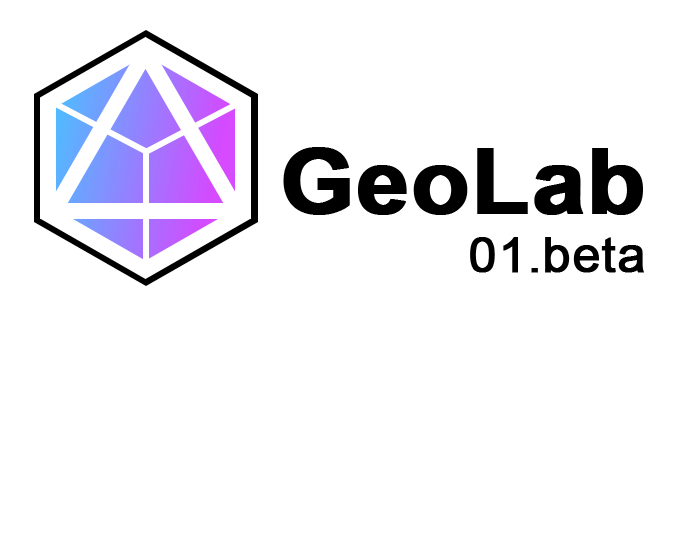
<style>
.page{position:relative;width:680px;height:558px;background:#ffffff}
.page>*{position:absolute;margin:0}
.t1{font:90px "Arial-BoldMT";color:#000000;font-weight:bold;scale:1.05 1}
.t2{font:48px "ArialMT";color:#000000;font-weight:bold;scale:1.05 1}
</style>
<div class="page">
<p class="t1" style="left:283px;top:147px;width:360px;height:68px">GeoLab</p>
<p class="t2" style="left:470px;top:237px;width:174px;height:36px">01.beta</p>
</div>
